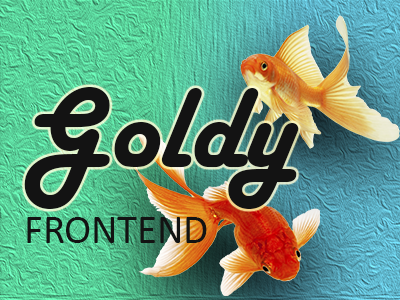
<style>
.page{position:relative;width:400px;height:300px}
.page>*{position:absolute;margin:0}
.t1{font:117.8px "HarlowSolid";color:#131313}
.t2{font:40.6px "Calibri";color:#131313;text-transform:uppercase}
</style>
<div class="page">
<p class="t1" style="left:24px;top:87px;width:275px;height:122px">Goldy</p>
<p class="t2" style="left:27px;top:217px;width:180px;height:26px">FRONTEND</p>
</div>
